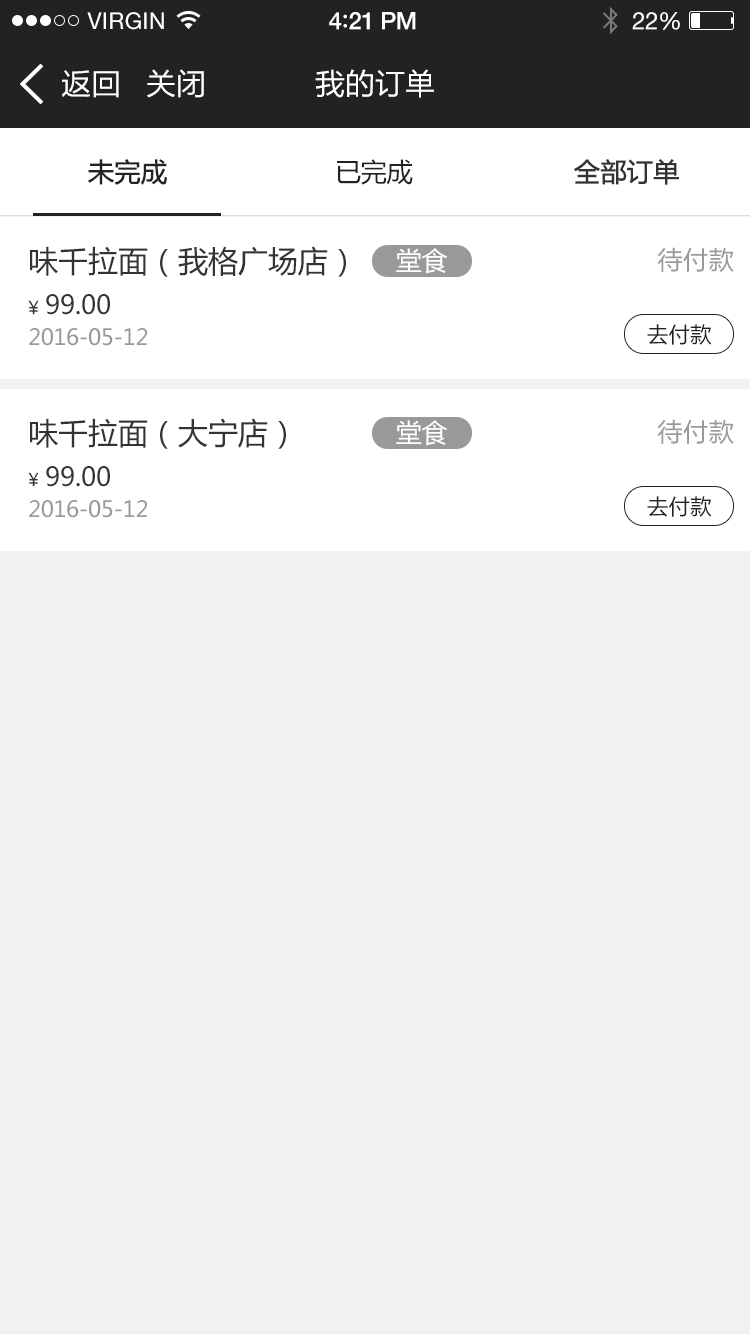
<style>
.page{position:relative;width:750px;height:1334px;background:#f1f1f1}
.page>*{position:absolute;margin:0}
.t1{font:23px "HelveticaNeue";letter-spacing:0.02em;color:#ffffff}
.t2{font:24px "HelveticaNeue-Medium";letter-spacing:-0.02em;color:#ffffff}
.t3{font:26px "Avenir-Medium";letter-spacing:-0.02em;color:#ffffff}
.t4{font:24px "HelveticaNeue";letter-spacing:-0.02em;color:#ffffff}
.t5{font:30px "FZLTHK--GBK1-0";color:#ffffff}
.t6{font:26px "MicrosoftYaHei";letter-spacing:-0.01em;color:#222222;font-weight:bold}
.t7{font:26px "MicrosoftYaHei";letter-spacing:-0.01em;color:#222222}
.t8{font:26px "MicrosoftYaHei";letter-spacing:-0.01em;color:#333333;font-weight:bold}
.t9{font:30px "MicrosoftYaHei";color:#333333}
.t10{font:26px "MicrosoftYaHei";letter-spacing:-0.01em;color:#ffffff}
.t11{font:26px "FZLTHK--GBK1-0";letter-spacing:-0.01em;color:#999999}
.t12{font:26px "MicrosoftYaHei";letter-spacing:-0.01em;color:#333333}
.t13{font:18px "MicrosoftYaHei";letter-spacing:-0.01em;color:#333333}
.t14{font:22px "MicrosoftYaHei";letter-spacing:-0.01em;color:#999999}
.t15{font:22px "FZLTHK--GBK1-0";letter-spacing:-0.01em;color:#222222}
</style>
<div class="page">
<p class="t1" style="left:87px;top:12px;width:77px;height:18px">VIRGIN</p>
<p class="t2" style="left:329px;top:12px;width:87px;height:18px">4<span class="t3">:</span>21 PM</p>
<p class="t4" style="left:632px;top:12px;width:48px;height:18px">22%</p>
<p class="t5" style="left:62px;top:70px;width:57px;height:28px">返回</p>
<p class="t5" style="left:147px;top:69px;width:57px;height:29px">关闭</p>
<p class="t5" style="left:315px;top:69px;width:119px;height:29px">我的订单</p>
<p class="t6" style="left:88px;top:159px;width:79px;height:26px">未完成</p>
<p class="t7" style="left:337px;top:159px;width:76px;height:26px">已完成</p>
<p class="t8" style="left:574px;top:159px;width:105px;height:26px">全部订单</p>
<p class="t9" style="left:30px;top:246px;width:316px;height:31px">味千拉面（我格广场店）</p>
<p class="t10" style="left:396px;top:248px;width:52px;height:26px">堂食</p>
<p class="t11" style="left:657px;top:247px;width:77px;height:25px">待付款</p>
<p class="t12" style="left:46px;top:294px;width:64px;height:21px">99.00</p>
<p class="t13" style="left:28px;top:300px;width:11px;height:15px">￥</p>
<p class="t14" style="left:29px;top:328px;width:118px;height:18px">2016-05-12</p>
<p class="t15" style="left:647px;top:324px;width:65px;height:21px">去付款</p>
<p class="t9" style="left:30px;top:418px;width:256px;height:31px">味千拉面（大宁店）</p>
<p class="t10" style="left:396px;top:420px;width:52px;height:26px">堂食</p>
<p class="t11" style="left:657px;top:419px;width:77px;height:25px">待付款</p>
<p class="t13" style="left:28px;top:472px;width:11px;height:15px">￥</p>
<p class="t12" style="left:46px;top:466px;width:64px;height:21px">99.00</p>
<p class="t15" style="left:647px;top:496px;width:65px;height:21px">去付款</p>
<p class="t14" style="left:29px;top:500px;width:118px;height:18px">2016-05-12</p>
</div>
